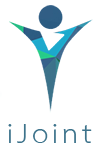
<style>
.page{position:relative;width:100px;height:150px;background:#ffffff}
.page>*{position:absolute;margin:0}
.t1{font:40.4px "THSarabunPSK";letter-spacing:0.1em;color:#3d738b}
</style>
<div class="page">
<p class="t1" style="left:8px;top:124px;width:84px;height:19px">iJoint</p>
</div>
